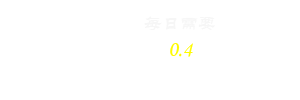
<style>
.page{position:relative;width:300px;height:100px;background:#ffffff}
.page>*{position:absolute;margin:0}
.t1{font:18px "STLiti";color:#f6f6f6}
.t2{font:22px "STLiti";color:#fefb00}
</style>
<div class="page">
<p class="t1" style="left:144px;top:16px;width:71px;height:41px;text-align:center">每日需要<br><span class="t2">0.4</span></p>
</div>
